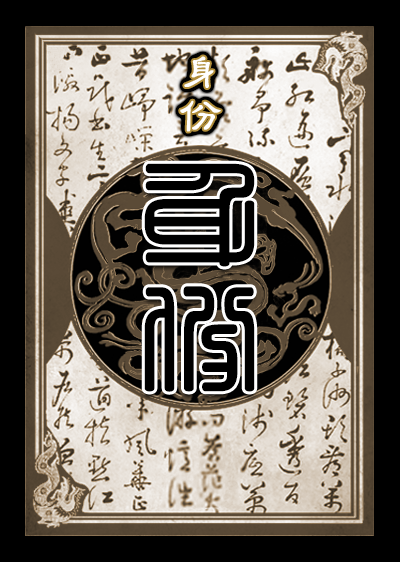
<style>
.page{position:relative;width:400px;height:562px;background:#000000}
.page>*{position:absolute;margin:0}
.t1{font:41.7px "ç»å¸ç»é¶ä¹¦ç¹-regular";letter-spacing:0.06em;color:#ffffff;font-weight:bold}
.t2{font:120.8px "¾­µä·±·½×­ Regular";letter-spacing:0.075em;color:#000000;font-weight:bold;scale:0.95 1}
</style>
<div class="page">
<p class="t1" style="left:180px;top:56px;width:41px;height:76px">身份</p>
<p class="t2" style="left:144px;top:163px;width:111px;height:229px">身份</p>
</div>
